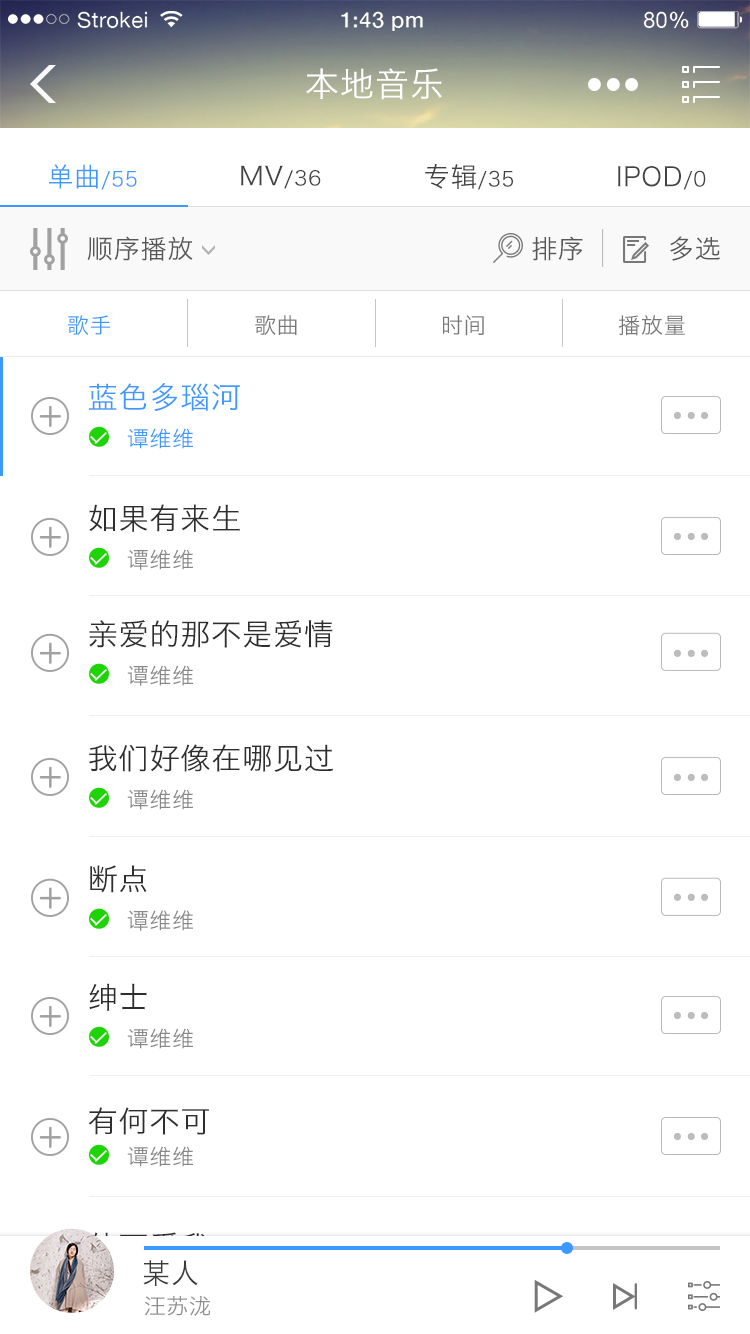
<style>
.page{position:relative;width:750px;height:1334px;background:#ffffff}
.page>*{position:absolute;margin:0}
.t1{font:33.9px "HiraginoSansGB-W3";letter-spacing:0.03em;color:#ffffff}
.t2{font:20.3px "HiraginoSansGB-W3";letter-spacing:0.03em;color:#3e99ff}
.t3{font:26.6px "HiraginoSansGB-W3";letter-spacing:0.03em;color:#3e99ff}
.t4{font:20px "HiraginoSansGB-W3";letter-spacing:0.03em;color:#424242}
.t5{font:25.7px "HiraginoSansGB-W3";letter-spacing:0.03em;color:#424242}
.t6{font:20.3px "HiraginoSansGB-W3";letter-spacing:0.03em;color:#424242}
.t7{font:26.6px "HiraginoSansGB-W3";letter-spacing:0.03em;color:#424242}
.t8{font:26px "HiraginoSansGB-W3";letter-spacing:0.03em;color:#575757}
.t9{font:22px "HiraginoSansGB-W3";letter-spacing:0.03em;color:#3e99ff}
.t10{font:22px "HiraginoSansGB-W3";letter-spacing:0.03em;color:#787878}
.t11{font:22px "HiraginoSansGB-W3";letter-spacing:0.03em;color:#777777}
.t12{font:29.9px "HiraginoSansGB-W3";letter-spacing:0.03em;color:#3e99ff}
.t13{font:21.9px "HiraginoSansGB-W3";letter-spacing:0.03em;color:#3e99ff}
.t14{font:29.9px "HiraginoSansGB-W3";letter-spacing:0.03em;color:#2e2e2e}
.t15{font:21.9px "HiraginoSansGB-W3";letter-spacing:0.03em;color:#888888}
.t16{font:30px "HiraginoSansGB-W3";letter-spacing:0.03em;color:#2e2e2e}
.t17{font:22px "HiraginoSansGB-W3";letter-spacing:0.03em;color:#888888}
.t18{font:30.1px "HiraginoSansGB-W3";letter-spacing:0.03em;color:#2e2e2e}
.t19{font:28px "HiraginoSansGB-W3";letter-spacing:0.03em;color:#3b3b3b}
.t20{font:22px "HiraginoSansGB-W3";letter-spacing:0.03em;color:#8f8f8f}
</style>
<div class="page">
<p class="t1" style="left:306px;top:68px;width:136px;height:32px">本地音乐</p>
<p class="t2" style="left:49px;top:164px;width:88px;height:26px"><span class="t3">单曲</span>/55</p>
<p class="t4" style="left:241px;top:165px;width:80px;height:24px"><span class="t5">MV</span>/36</p>
<p class="t6" style="left:425px;top:164px;width:88px;height:26px"><span class="t7">专辑</span>/35</p>
<p class="t7" style="left:618px;top:166px;width:88px;height:24px">IPOD<span class="t6">/0</span></p>
<p class="t8" style="left:87px;top:236px;width:106px;height:25px">顺序播放</p>
<p class="t8" style="left:532px;top:236px;width:51px;height:25px">排序</p>
<p class="t8" style="left:670px;top:236px;width:50px;height:25px">多选</p>
<p class="t9" style="left:68px;top:315px;width:43px;height:21px">歌手</p>
<p class="t10" style="left:255px;top:315px;width:42px;height:21px">歌曲</p>
<p class="t11" style="left:443px;top:315px;width:41px;height:21px">时间</p>
<p class="t11" style="left:619px;top:315px;width:66px;height:21px">播放量</p>
<p class="t12" style="left:89px;top:383px;width:151px;height:29px">蓝色多瑙河</p>
<p class="t13" style="left:127px;top:428px;width:66px;height:21px">谭维维</p>
<p class="t14" style="left:89px;top:504px;width:151px;height:28px">如果有来生</p>
<p class="t15" style="left:127px;top:549px;width:66px;height:21px">谭维维</p>
<p class="t16" style="left:89px;top:620px;width:244px;height:28px">亲爱的那不是爱情</p>
<p class="t17" style="left:127px;top:665px;width:66px;height:21px">谭维维</p>
<p class="t14" style="left:89px;top:744px;width:245px;height:28px">我们好像在哪见过</p>
<p class="t15" style="left:127px;top:789px;width:66px;height:21px">谭维维</p>
<p class="t18" style="left:90px;top:865px;width:57px;height:28px">断点</p>
<p class="t17" style="left:127px;top:910px;width:66px;height:21px">谭维维</p>
<p class="t14" style="left:89px;top:983px;width:58px;height:28px">绅士</p>
<p class="t15" style="left:127px;top:1028px;width:66px;height:21px">谭维维</p>
<p class="t14" style="left:88px;top:1107px;width:121px;height:28px">有何不可</p>
<p class="t15" style="left:127px;top:1146px;width:66px;height:21px">谭维维</p>
<p class="t19" style="left:143px;top:1260px;width:55px;height:26px">某人</p>
<p class="t20" style="left:144px;top:1296px;width:67px;height:20px">汪苏泷</p>
</div>
